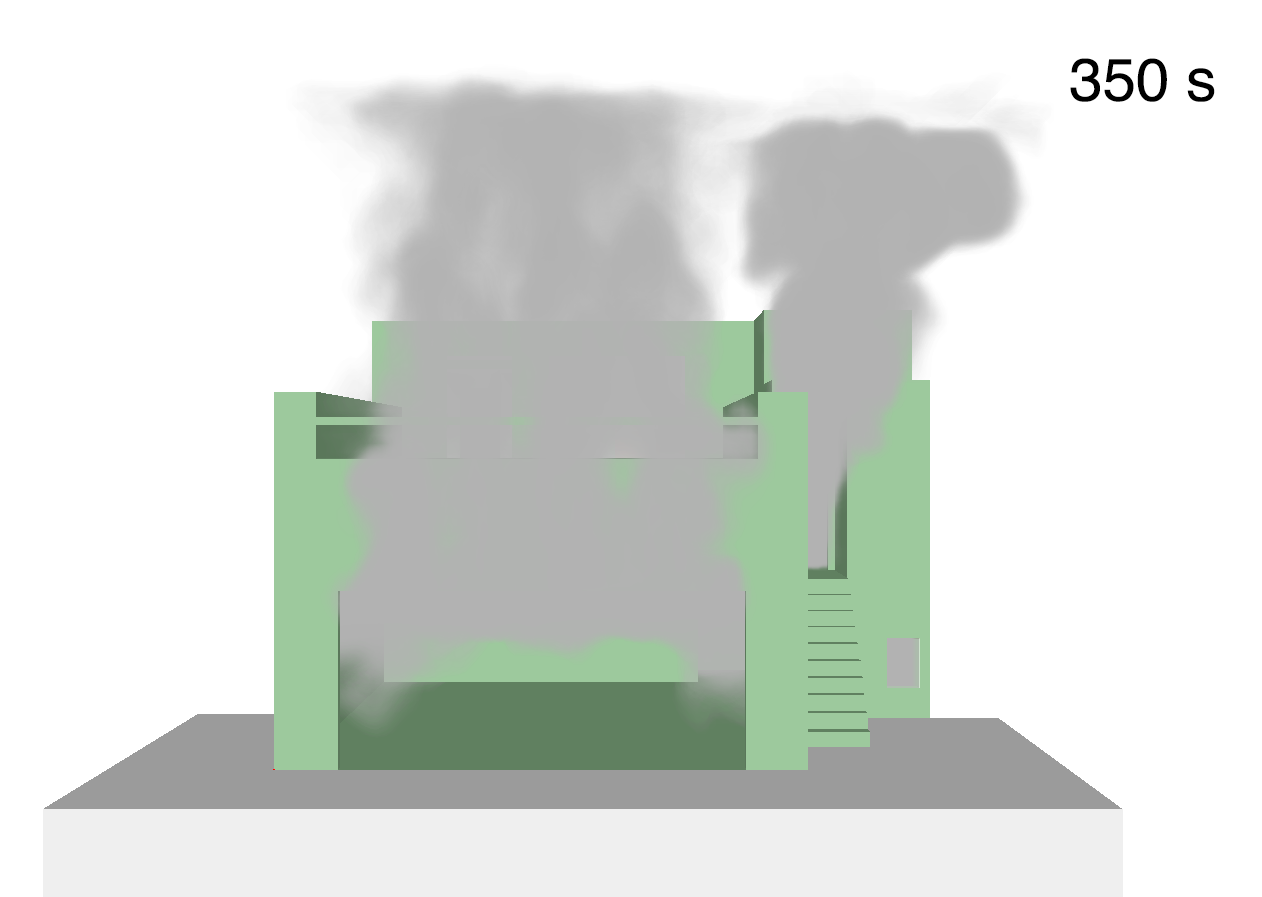
<style>
.page{position:relative;width:1262px;height:897px;background:#ffffff}
.page>*{position:absolute;margin:0}
.t1{font:60px "Helvetica";color:#000000}
</style>
<div class="page">
<p class="t1" style="left:1070px;top:58px;width:145px;height:44px">350 s</p>
</div>
